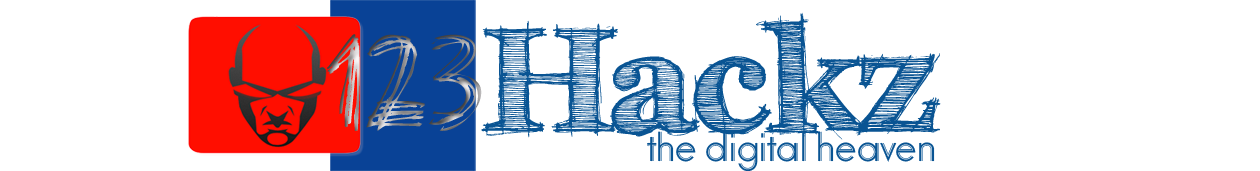
<style>
.page{position:relative;width:1260px;height:171px;background:#ffffff}
.page>*{position:absolute;margin:0}
.t1{font:148.2px "FFFTusj-Bold";color:#095493}
.t2{font:97px "Scratchmyback"}
.t3{font:41.7px "OdessaLetPlain";color:#095493}
</style>
<div class="page">
<p class="t1" style="left:481px;top:12px;width:460px;height:128px">Hackz</p>
<p class="t2" style="left:327px;top:34px;width:155px;height:97px">123</p>
<p class="t3" style="left:647px;top:131px;width:288px;height:41px">the digital heaven</p>
</div>
